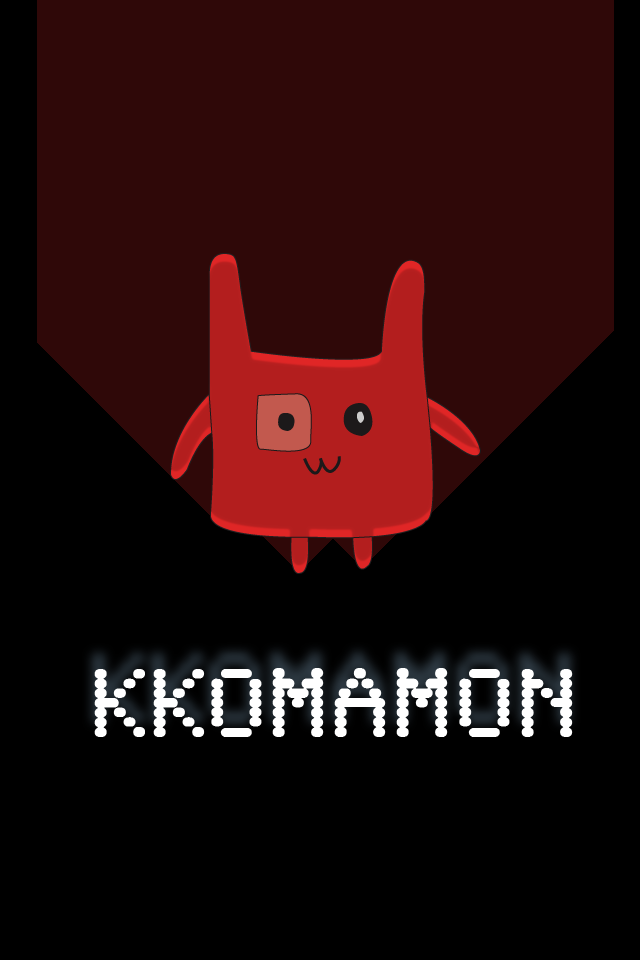
<style>
.page{position:relative;width:640px;height:960px;background:#000000}
.page>*{position:absolute;margin:0}
.t1{font:100px "SynchroLET";color:#ffffff}
</style>
<div class="page">
<p class="t1" style="left:94px;top:668px;width:479px;height:69px">Kkomamon</p>
</div>
